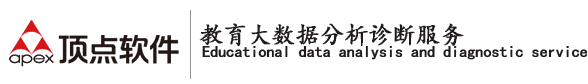
<style>
.page{position:relative;width:588px;height:84px;background:#ffffff}
.page>*{position:absolute;margin:0}
.t1{font:24px "¿¬Ìå";color:#1f1b1b;font-weight:bold}
.t2{font:16px "¿¬Ìå";color:#1f1b1b;font-weight:bold}
</style>
<div class="page">
<p class="t1" style="left:199px;top:23px;width:265px;height:23px">教育大数据分析诊断服务</p>
<p class="t2" style="left:202px;top:46px;width:386px;height:14px">Educational data analysis and diagnostic service</p>
</div>
